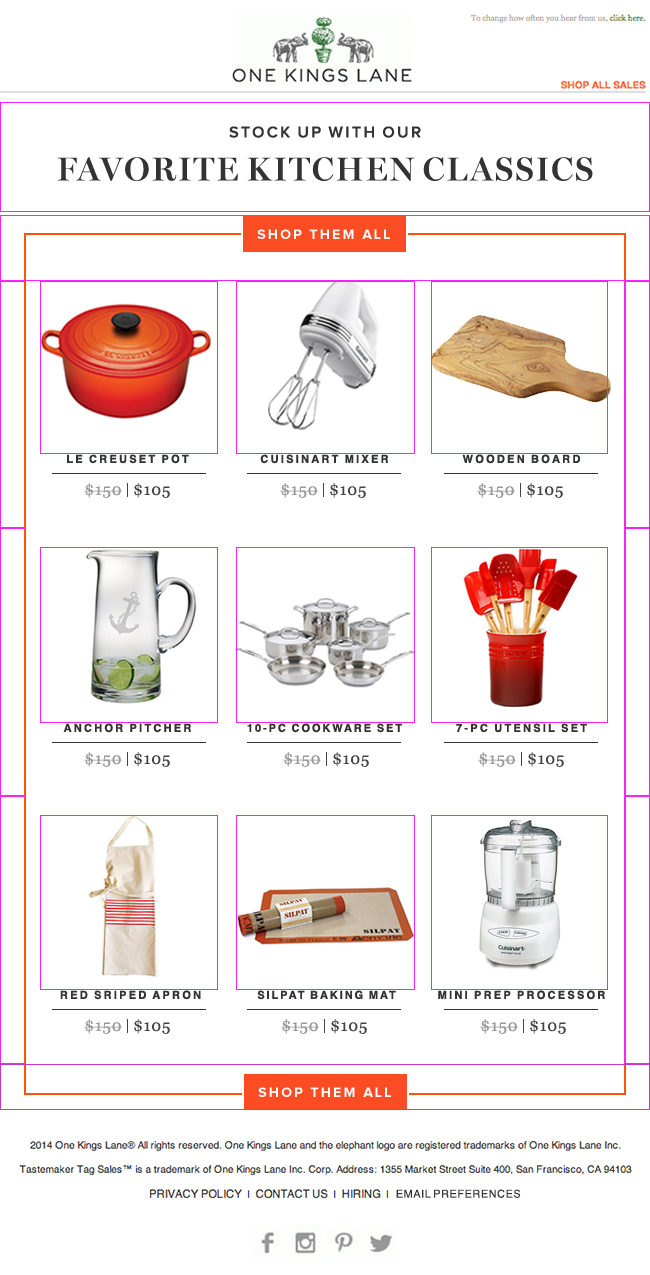
<style>
.page{position:relative;width:650px;height:1275px;background:#ffffff}
.page>*{position:absolute;margin:0}
.t1{font:33px/43px "MillerBanner-Semibold";letter-spacing:0.02em;color:#333333;text-transform:uppercase}
.t2{font:16px/30px "ProximaNova-Semibold";letter-spacing:0.1em;color:#333333;text-transform:uppercase}
.t3{font:14px "ProximaNova-Bold";letter-spacing:0.15em;color:#ffffff;text-transform:uppercase}
.t4{font:11px "Helvetica-Bold";letter-spacing:0.15em;color:#333333;text-transform:uppercase}
.t5{font:16px "Georgia";color:#999999;text-transform:uppercase}
.t6{font:16px "Georgia";color:#444444;text-transform:uppercase}
.t7{font:11px "Helvetica-Bold";letter-spacing:0.12em;color:#333333;text-transform:uppercase}
</style>
<div class="page">
<p class="t1" style="left:57px;top:126px;width:536px;height:55px;text-align:center"><span class="t2">Stock up with our<br></span>Favorite Kitchen Classics</p>
<p class="t3" style="left:257px;top:229px;width:133px;height:10px">SHOP THEM ALL</p>
<p class="t4" style="left:67px;top:454px;width:122px;height:10px">Le Creuset POT</p>
<p class="t4" style="left:260px;top:454px;width:128px;height:10px">cuisinart mixer</p>
<p class="t4" style="left:462px;top:454px;width:118px;height:10px">WOODEN BOARD</p>
<p class="t5" style="left:84px;top:483px;width:86px;height:15px">$150   <span class="t6">$105</span></p>
<p class="t5" style="left:280px;top:483px;width:86px;height:15px">$150   <span class="t6">$105</span></p>
<p class="t5" style="left:477px;top:483px;width:86px;height:15px">$150   <span class="t6">$105</span></p>
<p class="t4" style="left:63px;top:723px;width:128px;height:10px">ANCHOR PITCHER</p>
<p class="t7" style="left:247px;top:723px;width:155px;height:10px">10-PC COOKWARE SET</p>
<p class="t4" style="left:456px;top:723px;width:131px;height:10px">7-PC UTENSIL SET</p>
<p class="t5" style="left:84px;top:752px;width:86px;height:15px">$150   <span class="t6">$105</span></p>
<p class="t5" style="left:283px;top:752px;width:86px;height:15px">$150   <span class="t6">$105</span></p>
<p class="t5" style="left:478px;top:752px;width:86px;height:15px">$150   <span class="t6">$105</span></p>
<p class="t4" style="left:60px;top:990px;width:141px;height:10px">RED SRIPED APRON</p>
<p class="t7" style="left:257px;top:990px;width:139px;height:10px">SILPAT BAKING MAT</p>
<p class="t4" style="left:438px;top:990px;width:167px;height:10px">mini prep processor</p>
<p class="t5" style="left:84px;top:1019px;width:86px;height:15px">$150   <span class="t6">$105</span></p>
<p class="t5" style="left:281px;top:1019px;width:86px;height:15px">$150   <span class="t6">$105</span></p>
<p class="t5" style="left:480px;top:1019px;width:86px;height:15px">$150   <span class="t6">$105</span></p>
<p class="t3" style="left:258px;top:1087px;width:133px;height:10px">SHOP THEM ALL</p>
</div>
